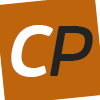
<style>
.page{position:relative;width:100px;height:100px;background:#be640d}
.page>*{position:absolute;margin:0}
.t1{font:70.8px "AmsiPro-BoldItalic";letter-spacing:-0.05em;color:#ffffff}
.t2{font:70.8px "AmsiPro-SemiBoldItalic";letter-spacing:-0.05em;color:#232323}
</style>
<div class="page">
<p class="t1" style="left:11px;top:25px;width:82px;height:52px">C<span class="t2">P</span></p>
</div>
